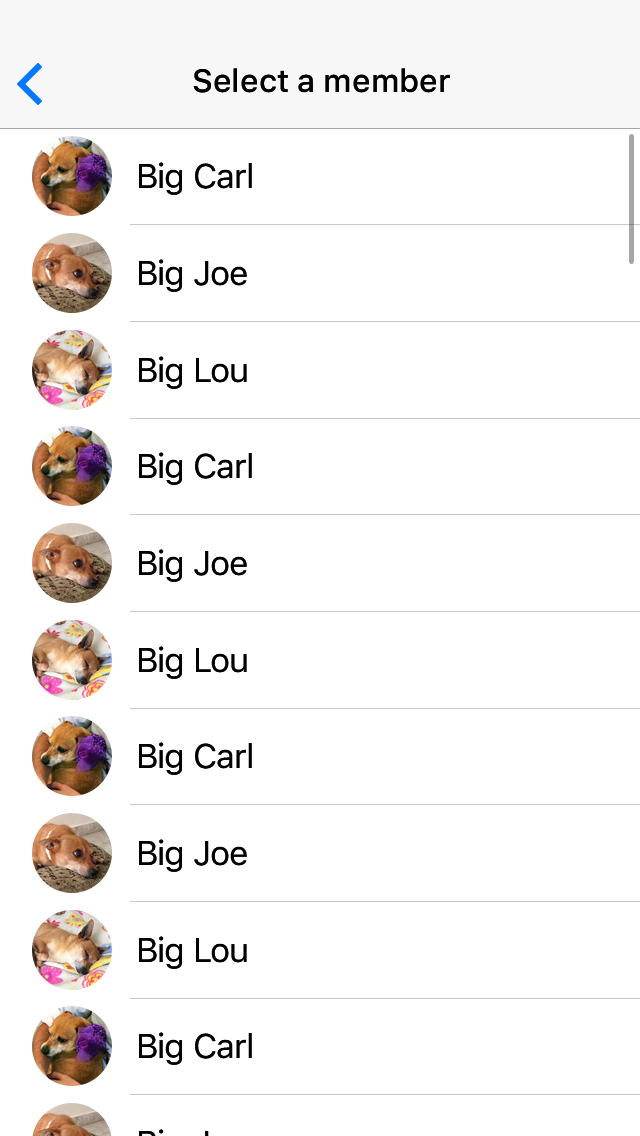
<style>
.page{position:relative;width:640px;height:1136px;background:#ffffff}
.page>*{position:absolute;margin:0}
.t1{font:32px "SFUIText-Medium";letter-spacing:-0.01em;color:#000000}
.t2{font:34px "SFUIText-Regular";letter-spacing:-0.03em;color:#000000}
</style>
<div class="page">
<p class="t1" style="left:193px;top:68px;width:257px;height:25px">Select a member</p>
<p class="t2" style="left:139px;top:162px;width:113px;height:33px">Big Carl</p>
<p class="t2" style="left:139px;top:259px;width:108px;height:33px">Big Joe</p>
<p class="t2" style="left:139px;top:356px;width:108px;height:33px">Big Lou</p>
<p class="t2" style="left:139px;top:452px;width:113px;height:33px">Big Carl</p>
<p class="t2" style="left:139px;top:549px;width:108px;height:33px">Big Joe</p>
<p class="t2" style="left:139px;top:646px;width:108px;height:33px">Big Lou</p>
<p class="t2" style="left:139px;top:742px;width:113px;height:33px">Big Carl</p>
<p class="t2" style="left:139px;top:839px;width:108px;height:33px">Big Joe</p>
<p class="t2" style="left:139px;top:936px;width:108px;height:33px">Big Lou</p>
<p class="t2" style="left:139px;top:1032px;width:113px;height:33px">Big Carl</p>
</div>
